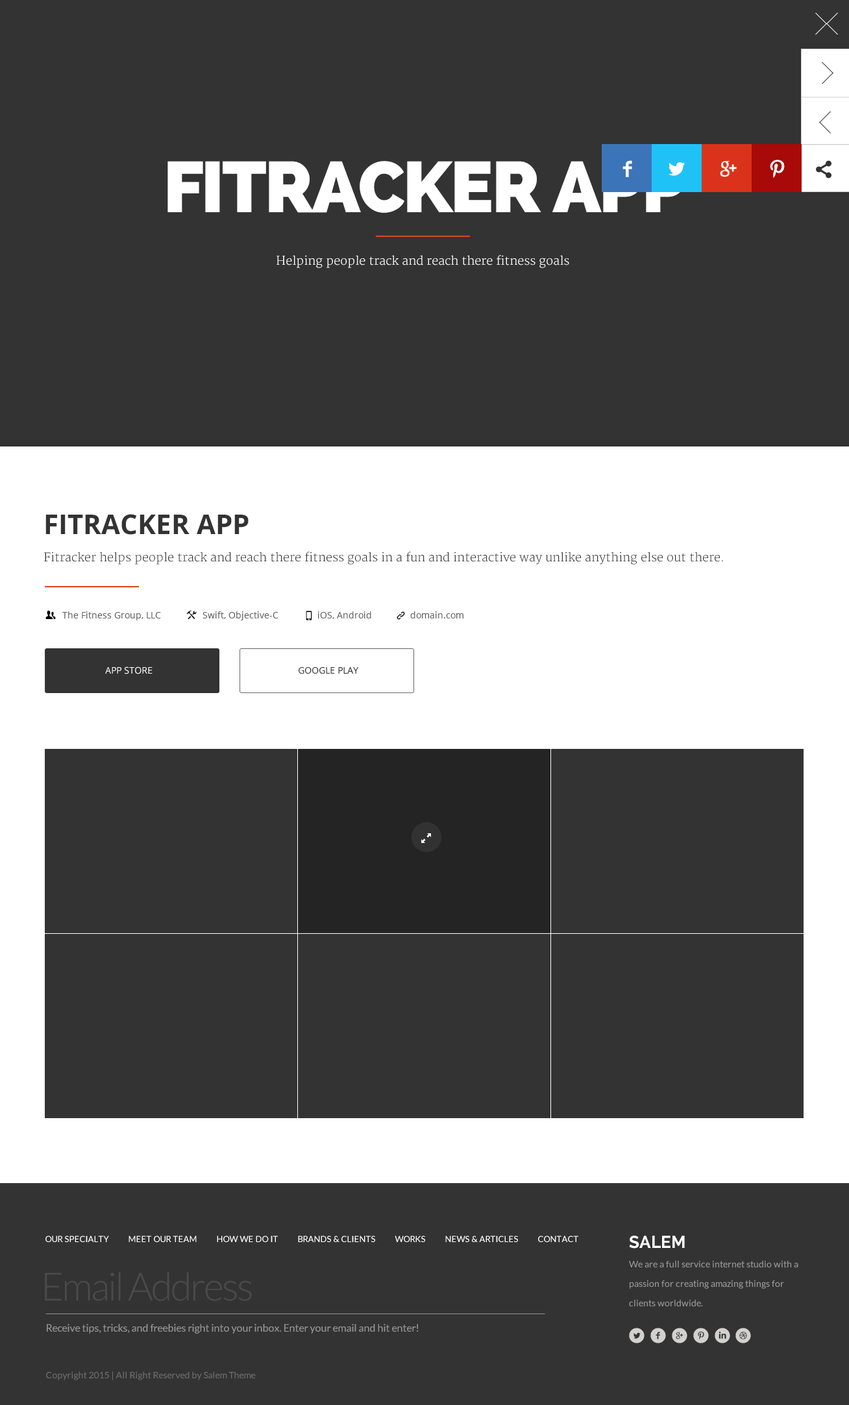
<style>
.page{position:relative;width:849px;height:1405px;background:#333333}
.page>*{position:absolute;margin:0}
.t1{font:71.4px "Raleway-Heavy";letter-spacing:-0.025em;color:#ffffff;text-transform:uppercase}
.t2{font:11.7px "Merriweather-Light";color:#ffffff}
.t3{font:27.3px "OpenSans-Bold";color:#333333;text-transform:uppercase}
.t4{font:11.7px "Merriweather-Light";color:#333333}
.t5{font:9.1px "OpenSans";color:#646464}
.t6{font:9.1px "OpenSans";color:#ffffff;text-transform:uppercase}
.t7{font:9.1px "OpenSans";color:#333333;text-transform:uppercase}
.t8{font:8.4px "Lato-Regular";color:#ffffff;text-transform:uppercase}
.t9{font:9.1px/19.5px "Lato-Regular";color:#999999}
.t10{font:16.9px/23.4px "Raleway-Bold";color:#ffffff}
.t11{font:38.9px "Lato-Light";letter-spacing:-0.05em;color:#4c4b4b}
.t12{font:10.4px "Lato-Regular";color:#999999}
.t13{font:9.1px "Lato-Regular";color:#6e6e6e}
</style>
<div class="page">
<p class="t1" style="left:167px;top:161px;width:518px;height:52px">fitracker app</p>
<p class="t2" style="left:276px;top:255px;width:293px;height:13px">Helping people track and reach there fitness goals</p>
<p class="t3" style="left:45px;top:514px;width:204px;height:21px">Fitracker app</p>
<p class="t4" style="left:44px;top:552px;width:679px;height:13px">Fitracker helps people track and reach there fitness goals in a fun and interactive way unlike anything else out there.</p>
<p class="t5" style="left:62px;top:611px;width:99px;height:9px">The Fitness Group, LLC</p>
<p class="t5" style="left:202px;top:611px;width:76px;height:9px">Swift, Objective-C</p>
<p class="t5" style="left:318px;top:611px;width:53px;height:8px">iOS, Android</p>
<p class="t5" style="left:410px;top:611px;width:53px;height:7px">domain.com</p>
<p class="t6" style="left:105px;top:666px;width:47px;height:8px">app store</p>
<p class="t7" style="left:298px;top:667px;width:61px;height:7px">google play</p>
<p class="t8" style="left:45px;top:1236px;width:533px;height:6px">Our Specialty          Meet Our Team          How We Do It          Brands &amp; Clients          Works          News &amp; Articles          Contact</p>
<p class="t9" style="left:629px;top:1236px;width:169px;height:70px"><span class="t10">SALEM<br></span>We are a full service internet studio with a passion for creating amazing things for clients worldwide.</p>
<p class="t11" style="left:45px;top:1272px;width:207px;height:29px">Email Address</p>
<p class="t12" style="left:47px;top:1324px;width:372px;height:10px">Receive tips, tricks, and freebies right into your inbox. Enter your email and hit enter!</p>
<p class="t13" style="left:46px;top:1371px;width:210px;height:9px">Copyright 2015 | All Right Reserved by Salem Theme</p>
</div>
